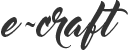
<style>
.page{position:relative;width:128px;height:50px;background:#ffffff}
.page>*{position:absolute;margin:0}
.t1{font:40.9px "MasterOfBreak";color:#333333}
.t2{font:40.9px "LucidaHandwriting-Italic";color:#333333}
</style>
<div class="page">
<p class="t1" style="left:1px;top:0px;width:127px;height:50px">e<span class="t2">-</span>craft</p>
</div>
